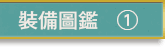
<style>
.page{position:relative;width:165px;height:47px;background:#569f9c}
.page>*{position:absolute;margin:0}
.t1{font:20px "GothicMB101Pr6N-Medium";color:#f2ebe5}
</style>
<div class="page">
<p class="t1" style="left:18px;top:11px;width:80px;height:19px">裝備圖鑑</p>
</div>
